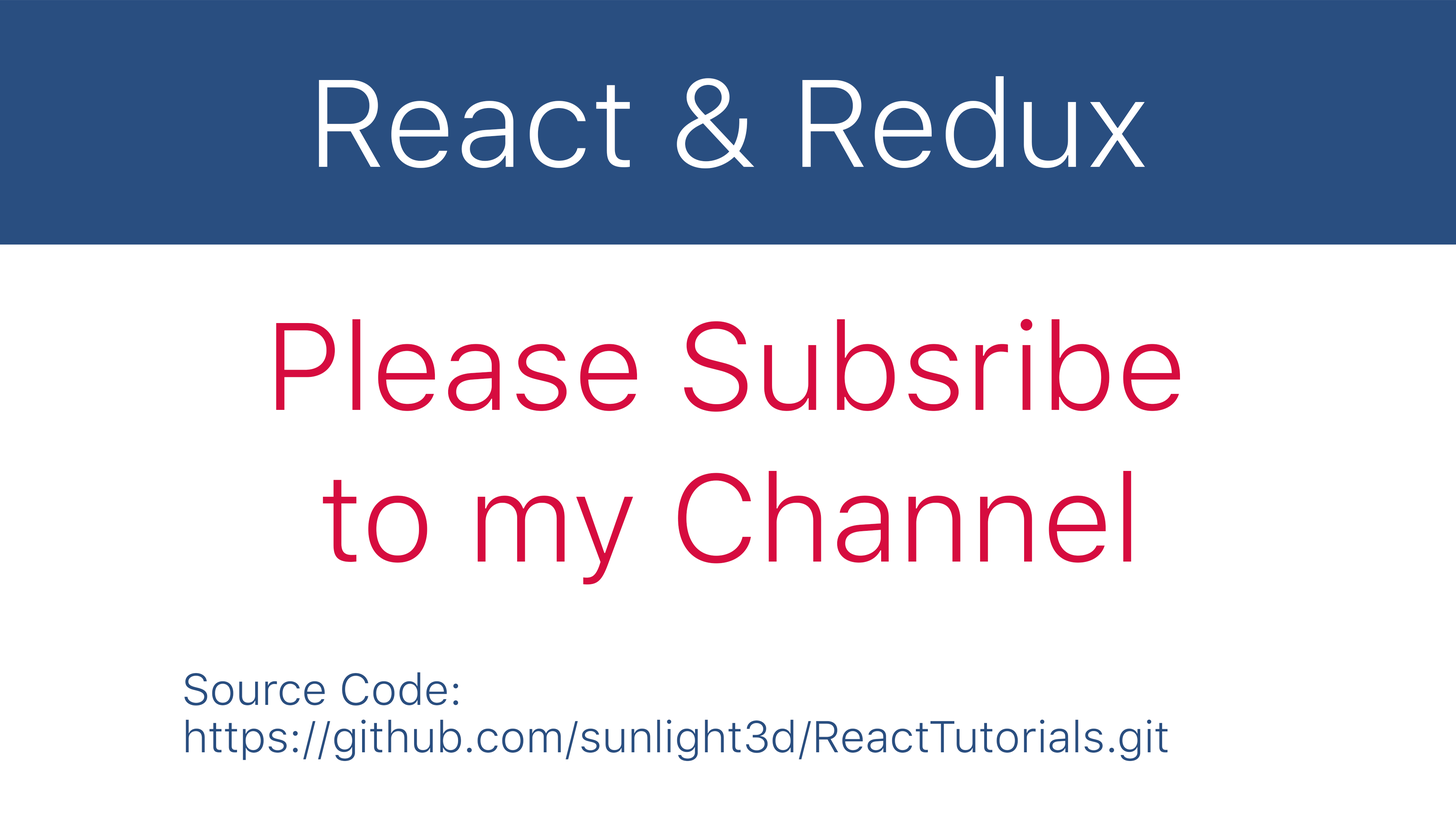
<style>
.page{position:relative;width:1456px;height:819px;background:#ffffff}
.page>*{position:absolute;margin:0}
.t1{font:123.2px "SFUIText-Light";color:#ffffff}
.t2{font:123.2px/37.9px "SFUIText-Light";color:#d60c3f}
.t3{font:44.2px/47.4px "SFUIText-Light";color:#294e80}
</style>
<div class="page">
<p class="t1" style="left:319px;top:76px;width:826px;height:92px">React &amp; Redux</p>
<p class="t2" style="left:276px;top:319px;width:904px;height:266px;text-align:center">Please Subsribe <br><br><br><br>to my Channel</p>
<p class="t3" style="left:184px;top:672px;width:984px;height:89px">Source Code:<br>https://github.com/sunlight3d/ReactTutorials.git</p>
</div>
